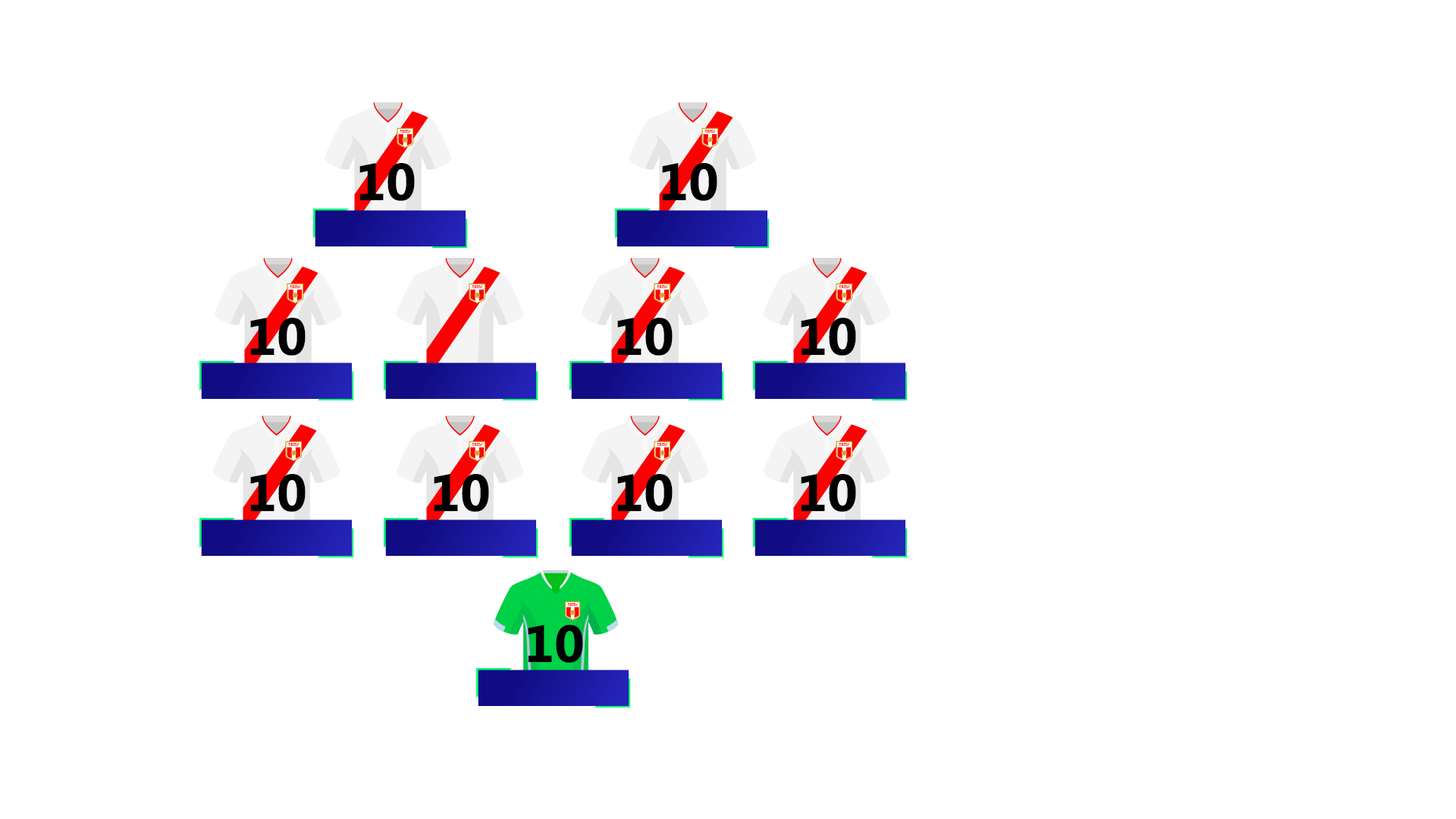
<style>
.page{position:relative;width:1456px;height:819px;background:#ffffff}
.page>*{position:absolute;margin:0}
.t1{font:52.2px "Segoe-Bold";color:#000000}
</style>
<div class="page">
<p class="t1" style="left:359px;top:163px;width:56px;height:38px">10</p>
<p class="t1" style="left:662px;top:163px;width:55px;height:38px">10</p>
<p class="t1" style="left:250px;top:318px;width:56px;height:38px">10</p>
<p class="t1" style="left:617px;top:318px;width:56px;height:38px">10</p>
<p class="t1" style="left:801px;top:318px;width:55px;height:38px">10</p>
<p class="t1" style="left:250px;top:474px;width:56px;height:38px">10</p>
<p class="t1" style="left:434px;top:474px;width:55px;height:38px">10</p>
<p class="t1" style="left:617px;top:474px;width:56px;height:38px">10</p>
<p class="t1" style="left:801px;top:474px;width:55px;height:38px">10</p>
<p class="t1" style="left:528px;top:625px;width:55px;height:38px">10</p>
</div>
